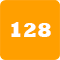
<style>
.page{position:relative;width:60px;height:60px;background:#ff9f00}
.page>*{position:absolute;margin:0}
.t1{font:20.8px "Rockwell-ExtraBold";color:#ffffff}
</style>
<div class="page">
<p class="t1" style="left:11px;top:22px;width:40px;height:15px">128</p>
</div>
